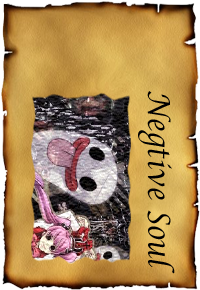
<style>
.page{position:relative;width:200px;height:290px}
.page>*{position:absolute;margin:0}
.t1{font:30.5px "LucidaCalligraphy-Italic";color:#000000;scale:0.85 1}
</style>
<div class="page">
<p class="t1" style="left:138px;top:91px;width:37px;height:183px;rotate:90deg">Negtive Soul</p>
</div>
